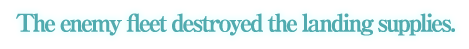
<style>
.page{position:relative;width:469px;height:49px;background:#ffffff}
.page>*{position:absolute;margin:0}
.t1{font:24px "RyuminPro-ExBold";letter-spacing:-0.09em;color:#51abaf}
</style>
<div class="page">
<p class="t1" style="left:16px;top:13px;width:439px;height:23px">The enemy fleet destroyed the landing supplies.</p>
</div>
